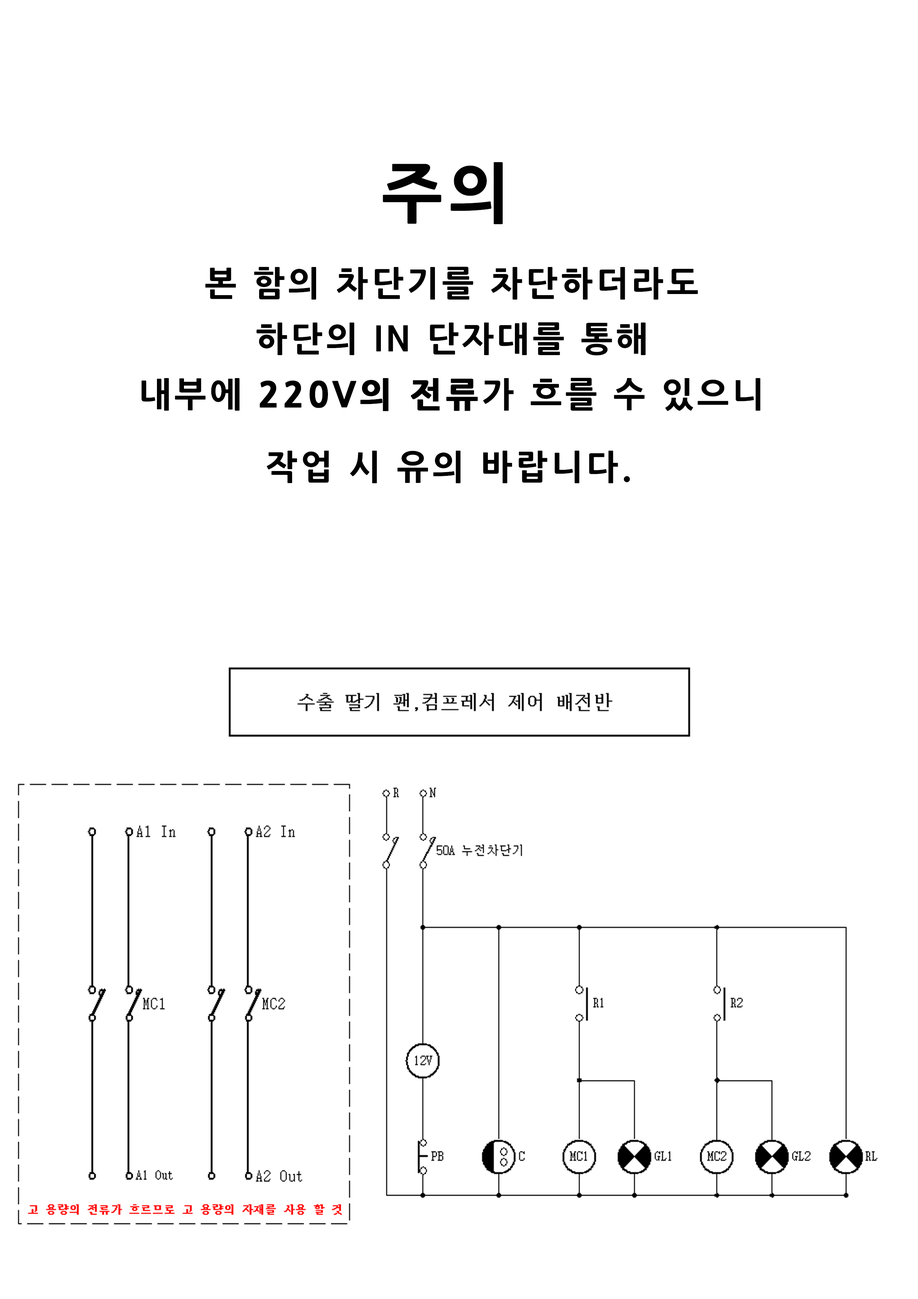
<style>
.page{position:relative;width:918px;height:1299px;background:#ffffff}
.page>*{position:absolute;margin:0}
.t1{font:33.9px/55.5px "NanumGothicExtraBold";letter-spacing:0.1em;color:#010101}
.t2{font:64.8px/77.1px "NanumGothicExtraBold";letter-spacing:0.1em;color:#010101}
.t3{font:33.9px/55.5px "NanumGothicExtraBold";letter-spacing:0.1em;color:#010101;font-weight:bold}
</style>
<div class="page">
<p class="t1" style="left:141px;top:162px;width:619px;height:321px;text-align:center"><span class="t2"><br>주의 <br></span>본 함의 차단기를 차단하더라도 <br>하단의 IN 단자대를 통해 <br>내부에 <span class="t3">220V의 전류</span>가 흐를 수 있으니 <br>작업 시 유의 바랍니다.</p>
</div>
